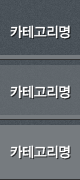
<style>
.page{position:relative;width:80px;height:180px;background:#767b7f}
.page>*{position:absolute;margin:0}
.t1{font:14px/60px "YDIYGO330";letter-spacing:-0.025em;color:#ffffff;scale:0.97 1}
</style>
<div class="page">
<p class="t1" style="left:10px;top:25px;width:60px;height:134px">카테고리명<br>카테고리명<br>카테고리명</p>
</div>
